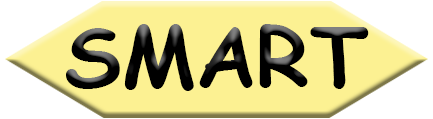
<style>
.page{position:relative;width:433px;height:119px;background:#fcf192}
.page>*{position:absolute;margin:0}
.t1{font:83.3px "ComicSansMS-Bold";color:#000000}
</style>
<div class="page">
<p class="t1" style="left:66px;top:24px;width:303px;height:67px">SMART</p>
</div>
